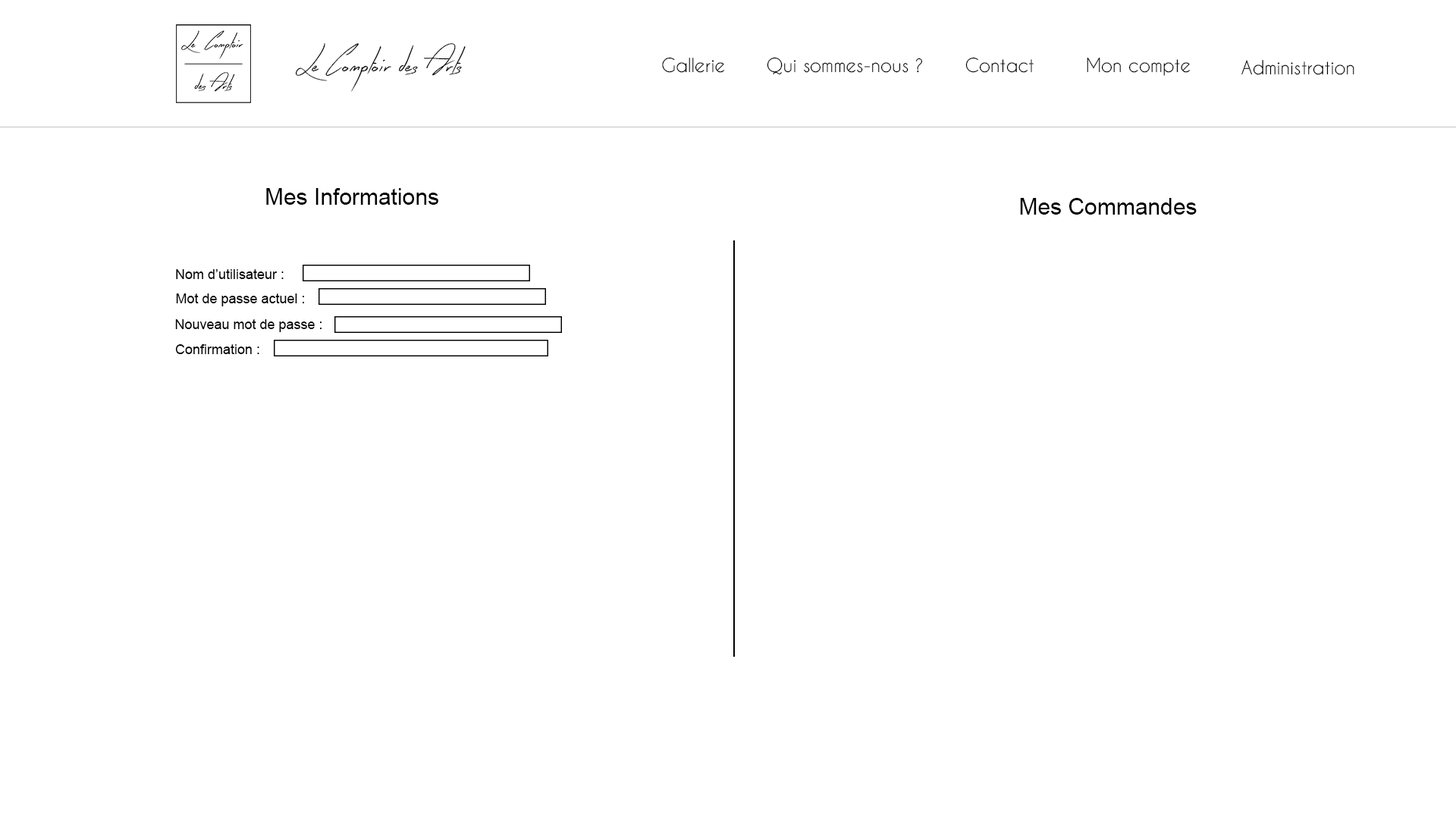
<style>
.page{position:relative;width:1456px;height:819px;background:#ffffff}
.page>*{position:absolute;margin:0}
.t1{font:33.4px "EarlyBird";color:#000000}
.t2{font:18.2px "CaviarDreams";color:#000000}
.t3{font:22.7px "ArialMT";color:#000000}
.t4{font:13.6px "ArialMT";color:#000000}
</style>
<div class="page">
<p class="t1" style="left:295px;top:43px;width:171px;height:49px">Le Comptoir des Arts</p>
<p class="t2" style="left:662px;top:57px;width:63px;height:16px">Gallerie</p>
<p class="t2" style="left:767px;top:57px;width:156px;height:18px">Qui sommes-nous ?</p>
<p class="t2" style="left:965px;top:57px;width:69px;height:16px">Contact</p>
<p class="t2" style="left:1087px;top:58px;width:104px;height:18px">Mon compte</p>
<p class="t2" style="left:1241px;top:60px;width:113px;height:15px">Administration</p>
<p class="t3" style="left:266px;top:188px;width:172px;height:17px">Mes Informations</p>
<p class="t3" style="left:1020px;top:198px;width:177px;height:17px">Mes Commandes</p>
<p class="t4" style="left:176px;top:269px;width:108px;height:10px">Nom d’utilisateur :</p>
<p class="t4" style="left:176px;top:293px;width:128px;height:13px">Mot de passe actuel :</p>
<p class="t4" style="left:175px;top:319px;width:147px;height:13px">Nouveau mot de passe :</p>
<p class="t4" style="left:175px;top:344px;width:84px;height:10px">Confirmation :</p>
</div>
